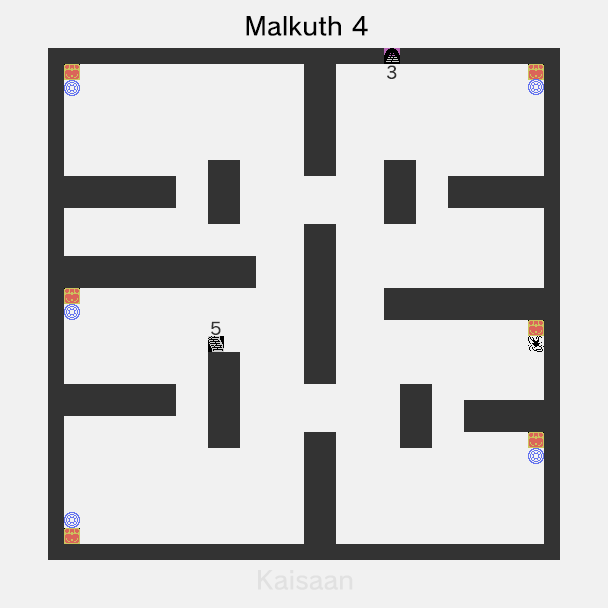
<style>
.page{position:relative;width:608px;height:608px;background:#f1f1f1}
.page>*{position:absolute;margin:0}
.t1{font:25px "nintendoNTLG-DB002";color:#000000}
.t2{font:16.7px "nintendoNTLG-DB002";color:#333333}
.t3{font:25px "nintendoNTLG-DB002";color:#e1e1e1}
</style>
<div class="page">
<p class="t1" style="left:246px;top:16px;width:122px;height:20px">Malkuth 4</p>
<p class="t2" style="left:387px;top:65px;width:10px;height:14px">3</p>
<p class="t2" style="left:211px;top:321px;width:10px;height:14px">5</p>
<p class="t3" style="left:258px;top:570px;width:95px;height:20px">Kaisaan</p>
</div>
